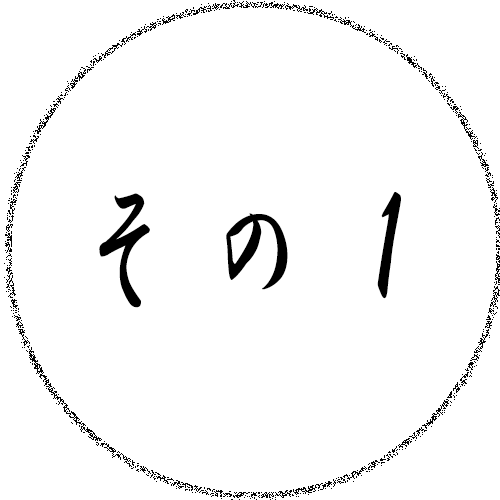
<style>
.page{position:relative;width:500px;height:500px;background:#ffffff}
.page>*{position:absolute;margin:0}
.t1{font:150px "HGSGyoshotai";letter-spacing:0.3em;color:#000000;scale:0.67 1}
</style>
<div class="page">
<p class="t1" style="left:99px;top:192px;width:302px;height:116px">その１</p>
</div>
